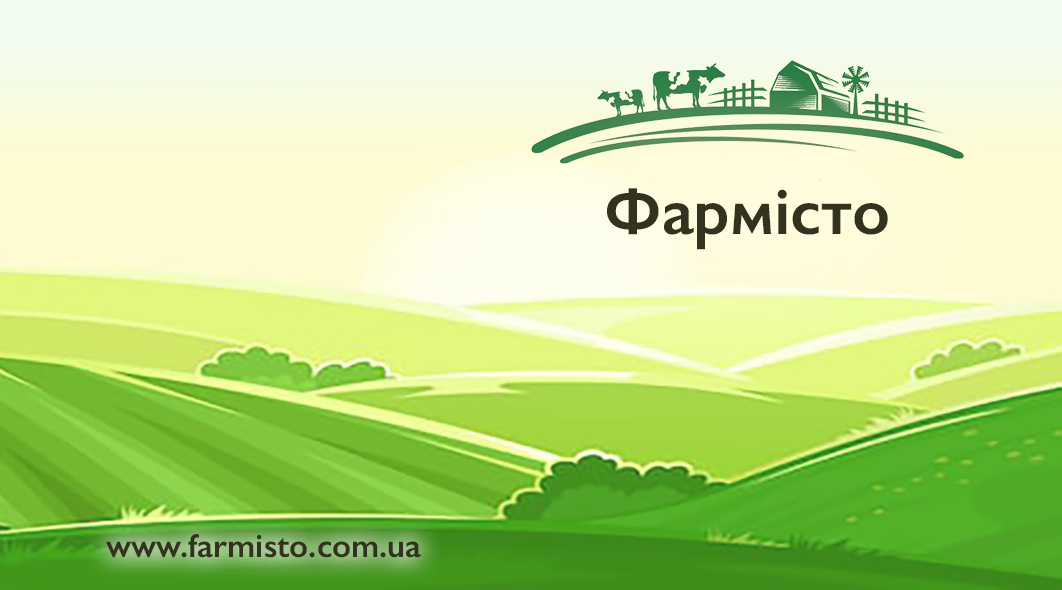
<style>
.page{position:relative;width:1062px;height:590px}
.page>*{position:absolute;margin:0}
.t1{font:66.6px "GillSans-SemiBold";color:#32321e}
.t2{font:33.3px "GillSans-SemiBold";color:#32321e}
</style>
<div class="page">
<p class="t1" style="left:607px;top:188px;width:281px;height:62px">Фармісто</p>
<p class="t2" style="left:106px;top:534px;width:315px;height:24px">www.farmisto.com.ua</p>
</div>
